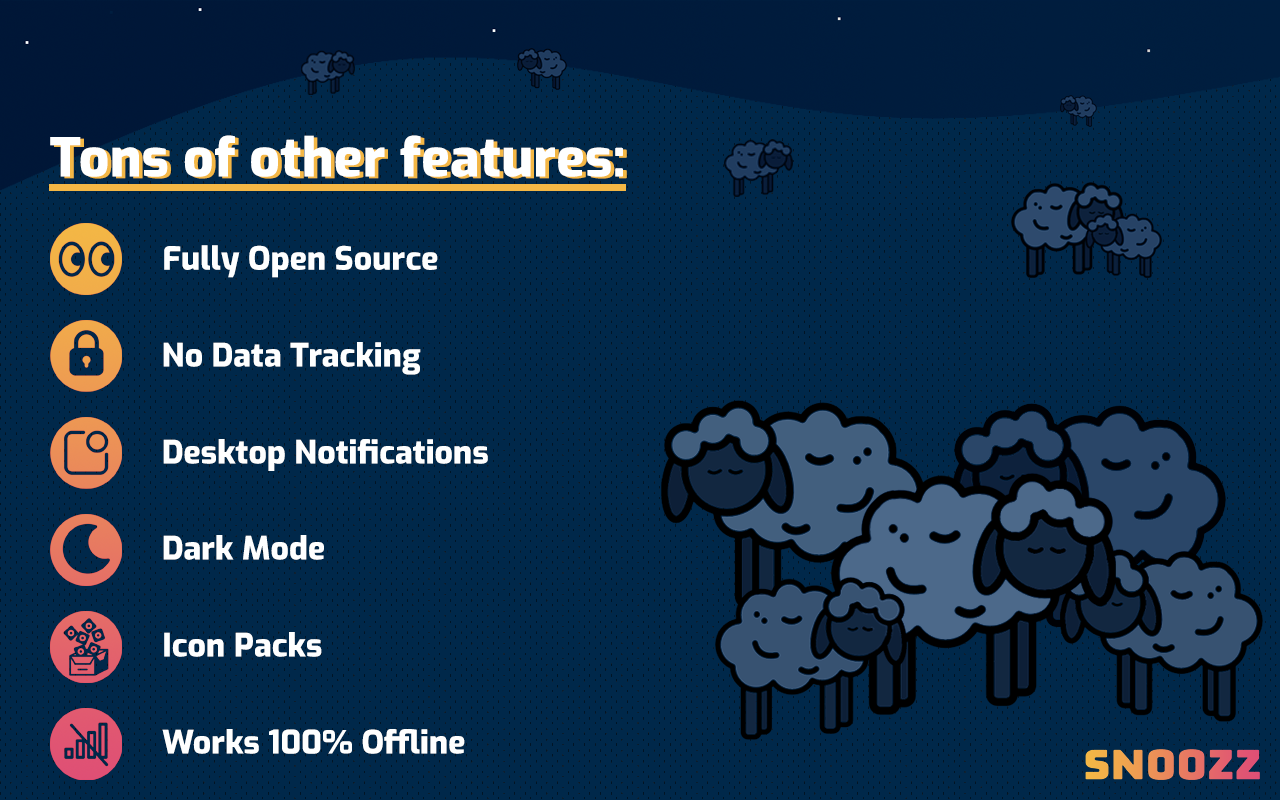
<style>
.page{position:relative;width:1280px;height:800px;background:#00284a}
.page>*{position:absolute;margin:0}
.t1{font:53.3px "Exo-ExtraBold";letter-spacing:0.005em;color:#feffff}
.t2{font:53.3px "Exo-ExtraBold";letter-spacing:0.005em}
.t3{font:32px "Exo-ExtraBold";letter-spacing:0.005em;color:#feffff}
</style>
<div class="page">
<p class="t1" style="left:50px;top:135px;width:573px;height:42px">Tons of other features:</p>
<p class="t2" style="left:54px;top:137px;width:573px;height:42px">Tons of other features:</p>
<p class="t3" style="left:164px;top:245px;width:274px;height:33px">Fully Open Source</p>
<p class="t3" style="left:163px;top:342px;width:258px;height:33px">No Data Tracking</p>
<p class="t3" style="left:163px;top:439px;width:325px;height:32px">Desktop Notifications</p>
<p class="t3" style="left:163px;top:535px;width:161px;height:25px">Dark Mode</p>
<p class="t3" style="left:164px;top:632px;width:158px;height:25px">Icon Packs</p>
<p class="t3" style="left:162px;top:729px;width:303px;height:25px">Works 100% Offline</p>
</div>
